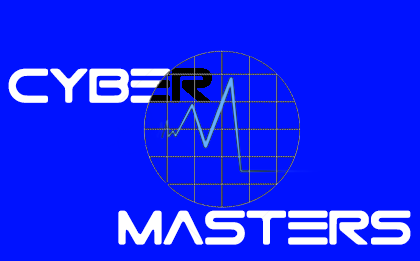
<style>
.page{position:relative;width:420px;height:261px;background:#0012ff}
.page>*{position:absolute;margin:0}
.t1{font:48px "GtekTechnology";color:#ffffff}
</style>
<div class="page">
<p class="t1" style="left:8px;top:68px;width:204px;height:35px">cyber</p>
<p class="t1" style="left:118px;top:210px;width:293px;height:35px">masters</p>
</div>
